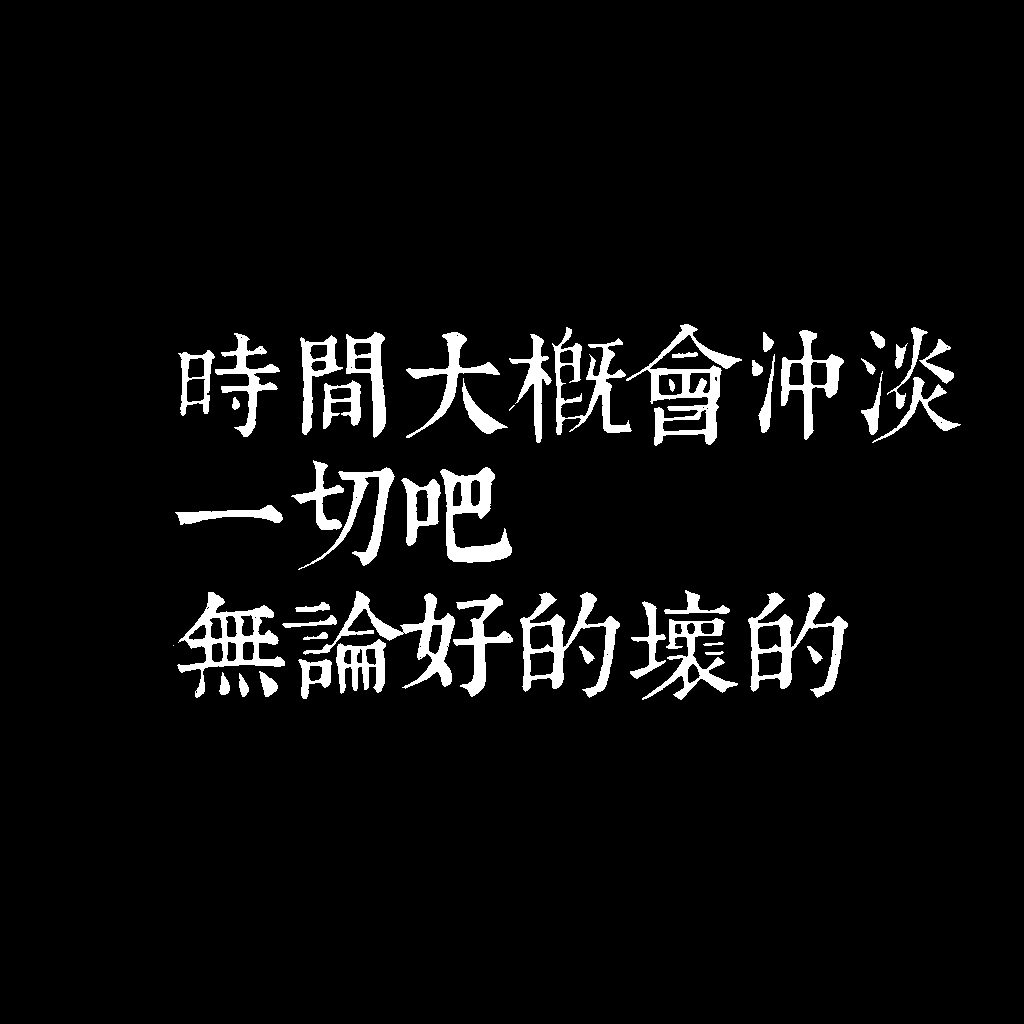
<style>
.page{position:relative;width:1024px;height:1024px;background:#000000}
.page>*{position:absolute;margin:0}
.t1{font:116px/130px "TpldKhangXiDictTrial";letter-spacing:-0.02em;color:#ffffff}
</style>
<div class="page">
<p class="t1" style="left:173px;top:324px;width:788px;height:376px">時間大概會沖淡<br>一切吧<br>無論好的壞的</p>
</div>
